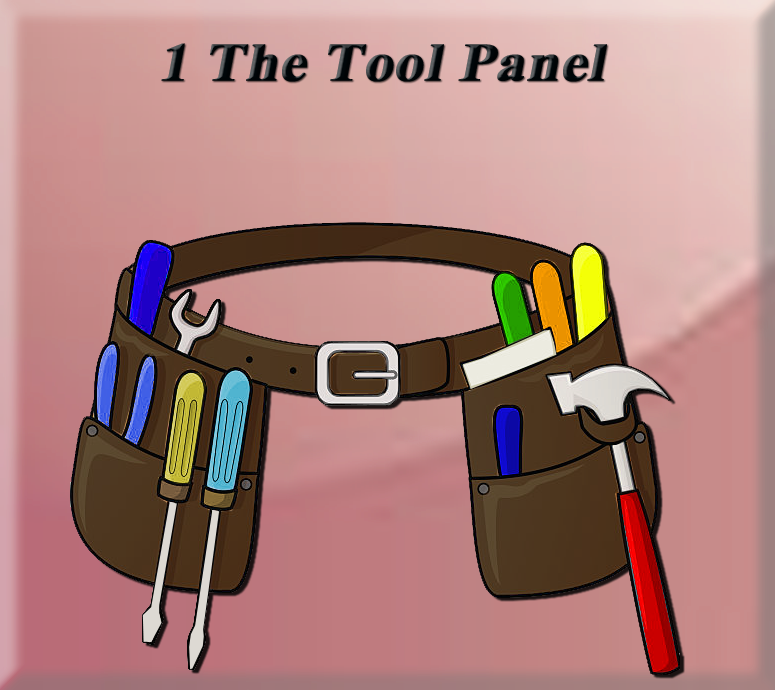
<style>
.page{position:relative;width:775px;height:690px}
.page>*{position:absolute;margin:0}
.t1{font:53.9px "TimesNewRomanPS-BoldMT";color:#000609;font-weight:bold;font-style:italic;scale:1.08 1}
</style>
<div class="page">
<p class="t1" style="left:161px;top:43px;width:446px;height:39px">1 The Tool Panel</p>
</div>
